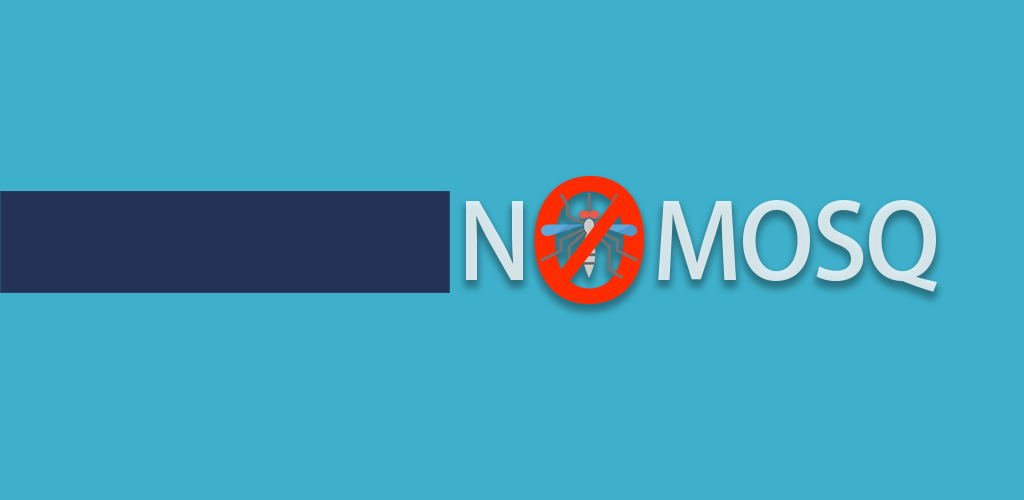
<style>
.page{position:relative;width:1024px;height:500px;background:#3eb0cb}
.page>*{position:absolute;margin:0}
.t1{font:162.5px "AdobeFanHeitiStd-Bold";letter-spacing:-0.01em;color:#ff2c02;scale:1.04 1}
.t2{font:103.5px "AdobeFanHeitiStd-Bold";letter-spacing:-0.025em;color:#d5e4e8}
</style>
<div class="page">
<p class="t1" style="left:534px;top:175px;width:110px;height:129px">O</p>
<p class="t2" style="left:466px;top:200px;width:471px;height:92px">N      MOSQ</p>
</div>
